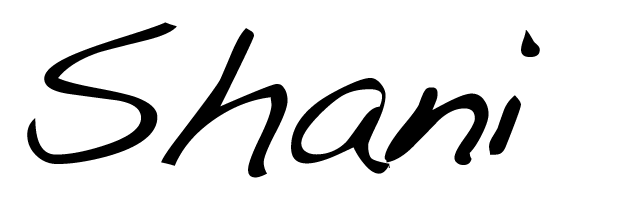
<style>
.page{position:relative;width:640px;height:200px;background:#ffffff}
.page>*{position:absolute;margin:0}
.t1{font:200px "Handwriting-Dakota";color:#000000}
</style>
<div class="page">
<p class="t1" style="left:27px;top:22px;width:513px;height:156px">Shani</p>
</div>
